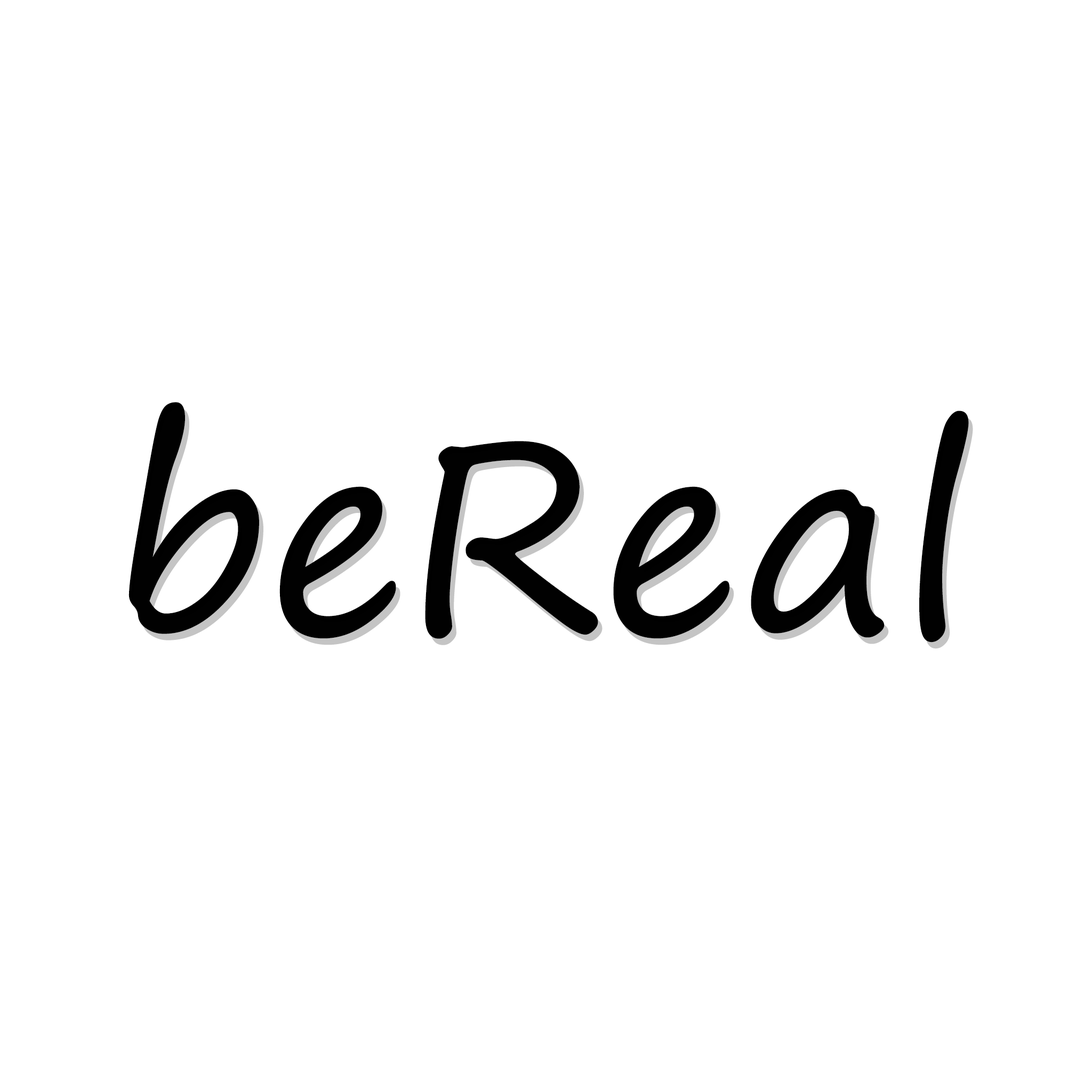
<style>
.page{position:relative;width:1092px;height:1092px;background:#ffffff}
.page>*{position:absolute;margin:0}
.t1{font:267.1px "SegoePrint";color:#000000}
</style>
<div class="page">
<p class="t1" style="left:129px;top:402px;width:840px;height:241px">beReal</p>
<p class="t1" style="left:133px;top:408px;width:840px;height:241px;opacity:0.33">beReal</p>
</div>
